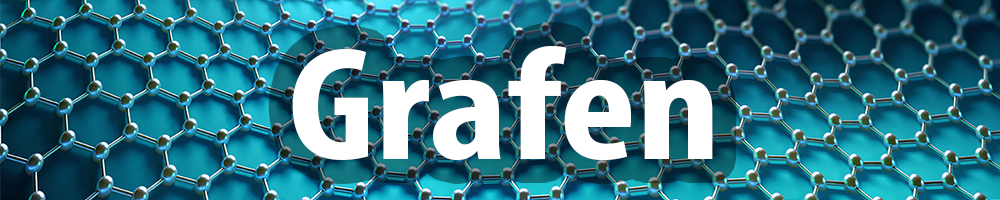
<style>
.page{position:relative;width:1000px;height:200px}
.page>*{position:absolute;margin:0}
.t1{font:161.9px "MyriadPro-BoldCond";color:#ffffff;scale:1.14 1}
</style>
<div class="page">
<p class="t1" style="left:292px;top:46px;width:421px;height:115px">Grafen</p>
</div>
